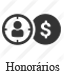
<style>
.page{position:relative;width:64px;height:74px;background:#ffffff}
.page>*{position:absolute;margin:0}
.t1{font:12px "TimesNewRomanPSMT";color:#333333}
</style>
<div class="page">
<p class="t1" style="left:5px;top:62px;width:55px;height:9px">Honorários</p>
</div>
